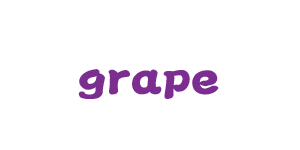
<style>
.page{position:relative;width:300px;height:150px;background:#ffffff}
.page>*{position:absolute;margin:0}
.t1{font:48px "Yj-BACDOO-Bold";color:#7c2e90}
</style>
<div class="page">
<p class="t1" style="left:78px;top:69px;width:141px;height:30px">grape</p>
</div>
